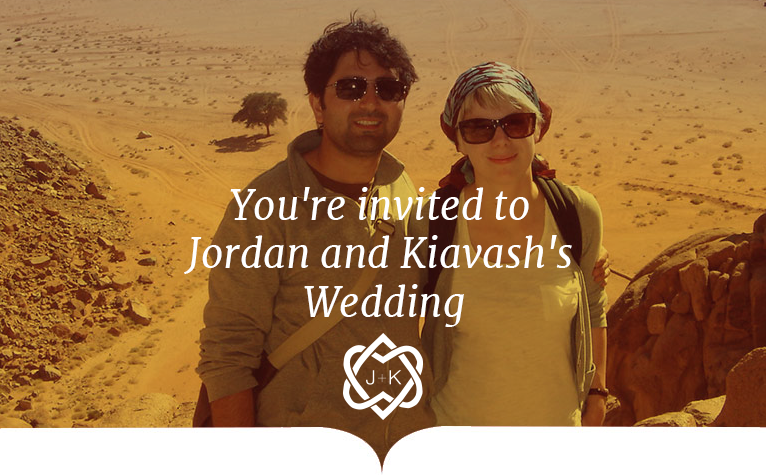
<style>
.page{position:relative;width:766px;height:475px}
.page>*{position:absolute;margin:0}
.t1{font:40px/48.5px "Merriweather-Italic";color:#ffffff}
</style>
<div class="page">
<p class="t1" style="left:184px;top:187px;width:388px;height:140px;text-align:center">You're invited to <br>Jordan and Kiavash's <br>Wedding</p>
</div>
